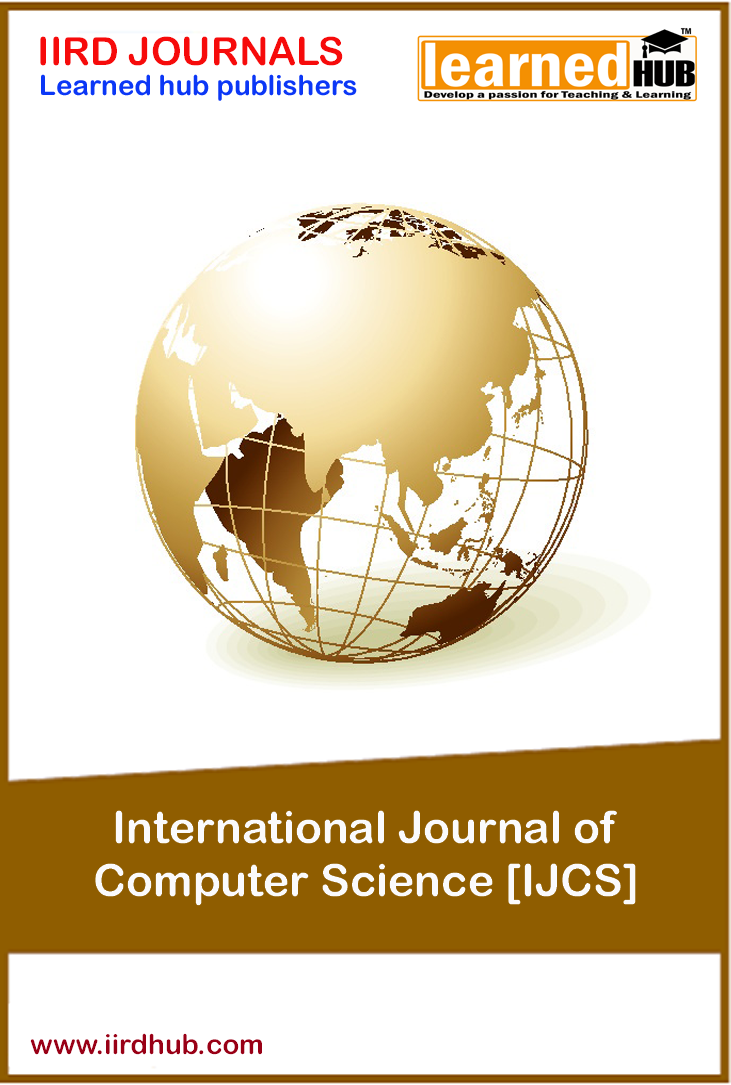
<style>
.page{position:relative;width:731px;height:1085px;background:#ffffff}
.page>*{position:absolute;margin:0}
.t1{font:38.9px "ArialRoundedMTBold";color:#f60b0b}
.t2{font:27.8px "ArialRoundedMTBold";color:#0b37f6}
.t3{font:44.4px "ArialRoundedMTBold";color:#fafafc}
.t4{font:27.8px "ArialRoundedMTBold";color:#990016}
</style>
<div class="page">
<p class="t1" style="left:40px;top:36px;width:303px;height:30px">IIRD JOURNALS</p>
<p class="t2" style="left:41px;top:74px;width:316px;height:27px">Learned hub publishers</p>
<p class="t3" style="left:95px;top:810px;width:541px;height:96px;text-align:center">International Journal of <br>Computer Science [IJCS]</p>
<p class="t4" style="left:30px;top:1033px;width:232px;height:22px">www.iirdhub.com</p>
</div>
